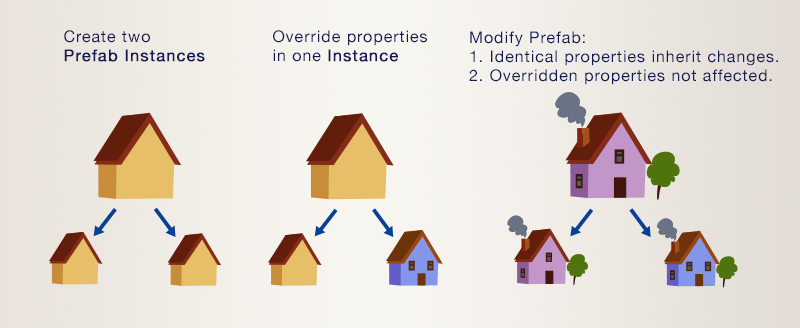
<style>
.page{position:relative;width:800px;height:328px}
.page>*{position:absolute;margin:0}
.t1{font:16px "HelveticaNeue";letter-spacing:0.06em;color:#131a55;font-weight:bold}
.t2{font:16px "HelveticaNeue";letter-spacing:0.06em;color:#131a55}
</style>
<div class="page">
<p class="t1" style="left:64px;top:30px;width:141px;height:32px"><span class="t2">Create two <br></span>Prefab Instances</p>
<p class="t2" style="left:273px;top:30px;width:154px;height:32px">Override properties <br>in one <span class="t1">Instance</span></p>
<p class="t2" style="left:469px;top:31px;width:309px;height:54px">Modify Prefab:<br>1. Identical properties inherit changes.<br>2. Overridden properties not affected.</p>
</div>
